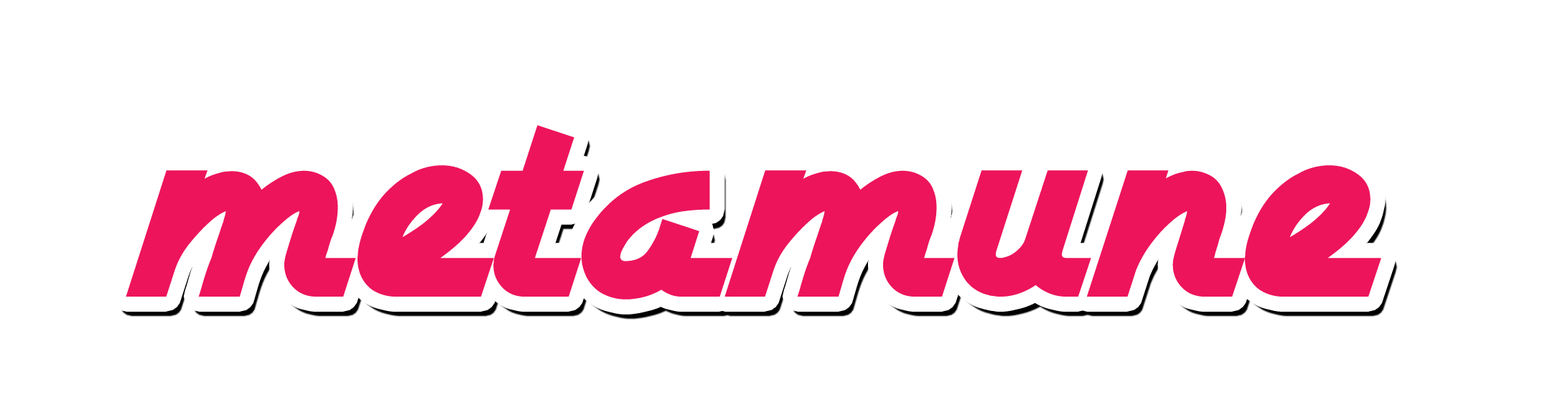
<style>
.page{position:relative;width:1568px;height:418px;background:#ffffff}
.page>*{position:absolute;margin:0}
.t1{font:388.9px "Airstream";color:#ed145b}
</style>
<div class="page">
<p class="t1" style="left:126px;top:125px;width:1255px;height:174px">metamune</p>
</div>
